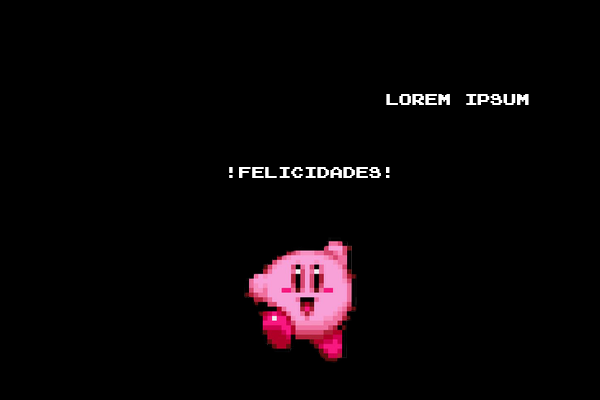
<style>
.page{position:relative;width:600px;height:400px;background:#000000}
.page>*{position:absolute;margin:0}
.t1{font:13.3px "ArcadeNormal";color:#ffffff}
</style>
<div class="page">
<p class="t1" style="left:386px;top:94px;width:143px;height:11px">Lorem Ipsum</p>
<p class="t1" style="left:229px;top:167px;width:161px;height:11px">!FELICIDADES!</p>
</div>
